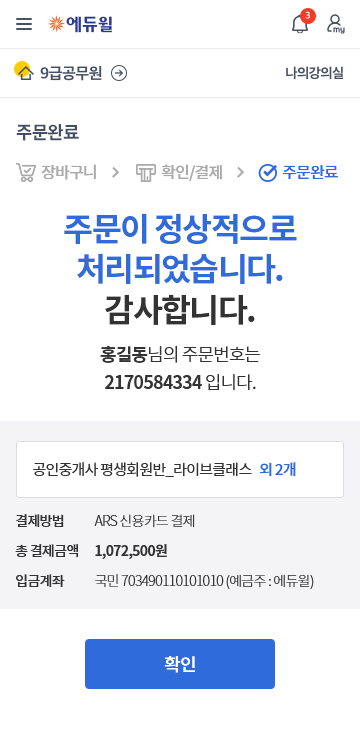
<style>
.page{position:relative;width:360px;height:729px;background:#ffffff}
.page>*{position:absolute;margin:0}
.t1{font:18px "NotoSansCJKkr-Bold";letter-spacing:-0.05em;color:#454f63}
.t2{font:16px "NotoSansCJKkr-Medium";letter-spacing:-0.05em;color:#aaaaaa}
.t3{font:16px "NotoSansCJKkr-Medium";letter-spacing:-0.05em;color:#2f6bda}
.t4{font:32.6px/40.8px "NotoSansCJKkr-Bold";letter-spacing:-0.05em;color:#2f6bda}
.t5{font:32.6px/40.8px "NotoSansCJKkr-Bold";letter-spacing:-0.05em;color:#333333}
.t6{font:18px/28px "NotoSansCJKkr-Bold";letter-spacing:-0.05em;color:#333333}
.t7{font:18px/28px "NotoSansCJKkr-DemiLight";letter-spacing:-0.05em;color:#333333}
.t8{font:15px "NotoSansCJKkr-Regular";letter-spacing:-0.05em;color:#333333}
.t9{font:15px "NotoSansCJKkr-Medium";letter-spacing:-0.05em;color:#2f6bda}
.t10{font:14px/30px "NotoSansCJKkr-Medium";letter-spacing:-0.05em;color:#333333}
.t11{font:14px/30px "NotoSansCJKkr-Light";letter-spacing:-0.05em;color:#333333}
.t12{font:14px/30px "NotoSansCJKkr-Bold";letter-spacing:-0.05em;color:#333333}
.t13{font:18px "NotoSansCJKkr-Medium";letter-spacing:-0.05em;color:#ffffff}
</style>
<div class="page">
<p class="t1" style="left:16px;top:124px;width:63px;height:17px">주문완료</p>
<p class="t2" style="left:41px;top:164px;width:55px;height:16px">장바구니</p>
<p class="t2" style="left:161px;top:164px;width:61px;height:17px">확인/결제</p>
<p class="t3" style="left:282px;top:165px;width:56px;height:15px">주문완료</p>
<p class="t4" style="left:64px;top:213px;width:233px;height:112px;text-align:center">주문이 정상적으로<br>처리되었습니다.<br><span class="t5">감사합니다.</span></p>
<p class="t6" style="left:100px;top:345px;width:160px;height:46px;text-align:center">홍길동<span class="t7">님의 주문번호는<br></span>2170584334 <span class="t7">입니다.</span></p>
<p class="t8" style="left:33px;top:462px;width:263px;height:15px">공인중개사 평생회원반_라이브클래스   <span class="t9">외 2개</span></p>
<p class="t10" style="left:15px;top:514px;width:63px;height:73px">결제방법<br>총 결제금액<br>입금계좌</p>
<p class="t11" style="left:94px;top:514px;width:220px;height:75px">ARS 신용카드 결제<br><span class="t12">1,072,500원<br></span>국민 703490110101010 (예금주 : 에듀윌)</p>
<p class="t13" style="left:164px;top:656px;width:31px;height:17px">확인</p>
</div>
